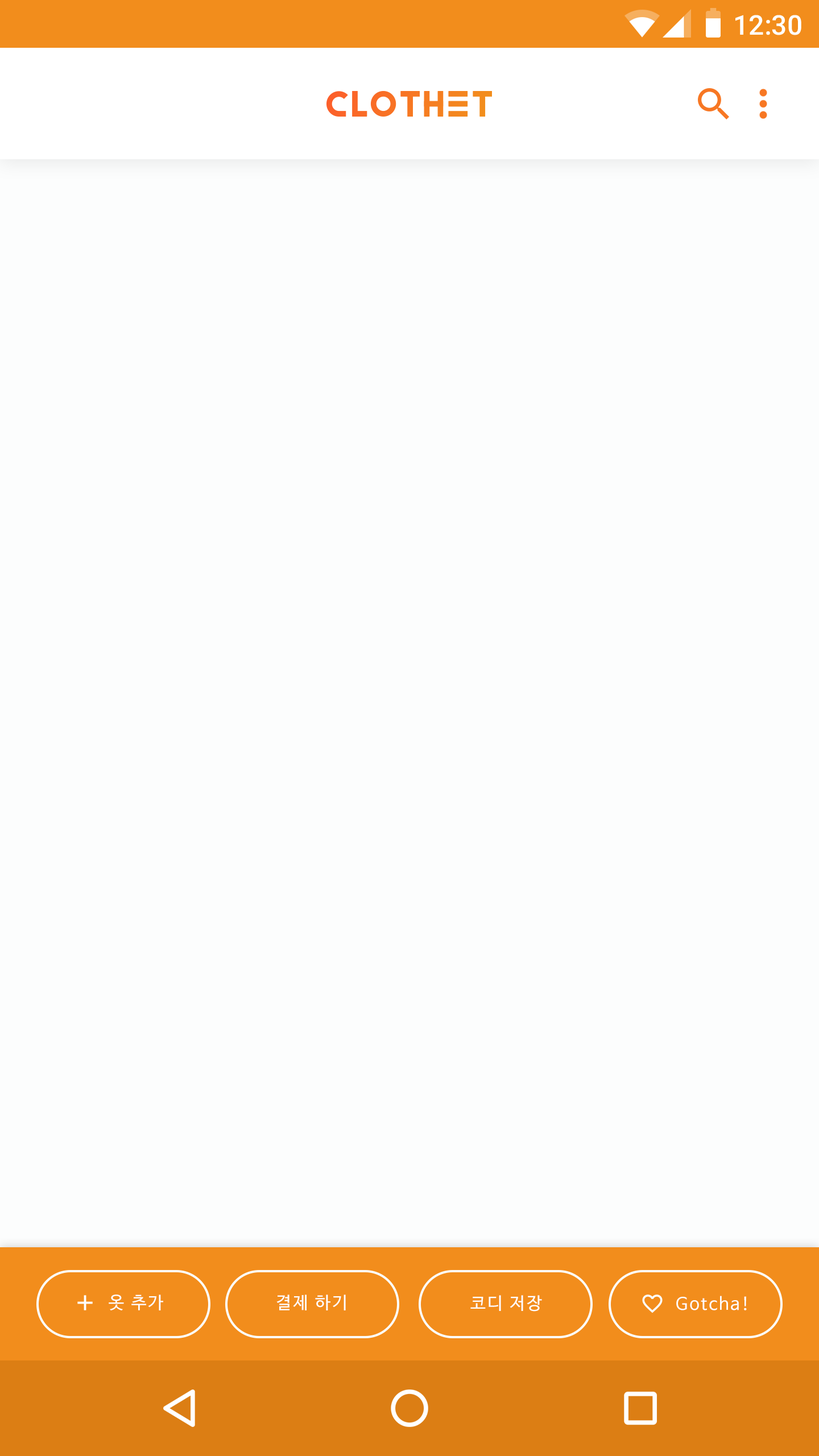
<style>
.page{position:relative;width:819px;height:1456px;background:#fcfdfd}
.page>*{position:absolute;margin:0}
.t1{font:27.3px "Roboto-Medium";color:#ffffff}
.t2{font:17.1px "NanumBarunGothic";letter-spacing:0.1em;color:#ffffff}
</style>
<div class="page">
<p class="t1" style="left:735px;top:15px;width:66px;height:20px">12:30</p>
<p class="t2" style="left:109px;top:1294px;width:54px;height:16px">옷 추가</p>
<p class="t2" style="left:276px;top:1294px;width:70px;height:16px">결제 하기</p>
<p class="t2" style="left:470px;top:1295px;width:72px;height:17px">코디 저장</p>
<p class="t2" style="left:676px;top:1296px;width:71px;height:14px">Gotcha!</p>
</div>
